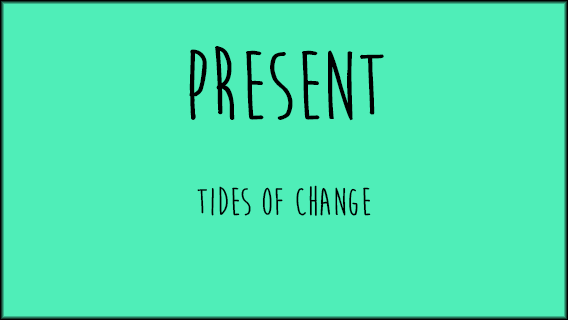
<style>
.page{position:relative;width:568px;height:320px;background:#4feeb8}
.page>*{position:absolute;margin:0}
.t1{font:40px "MoonFlowerBold";color:#000000}
.t2{font:100px "MoonFlowerBold";color:#000000}
</style>
<div class="page">
<p class="t1" style="left:189px;top:46px;width:195px;height:170px;text-align:center"><span class="t2">Present<br></span><br>tides of change</p>
</div>
